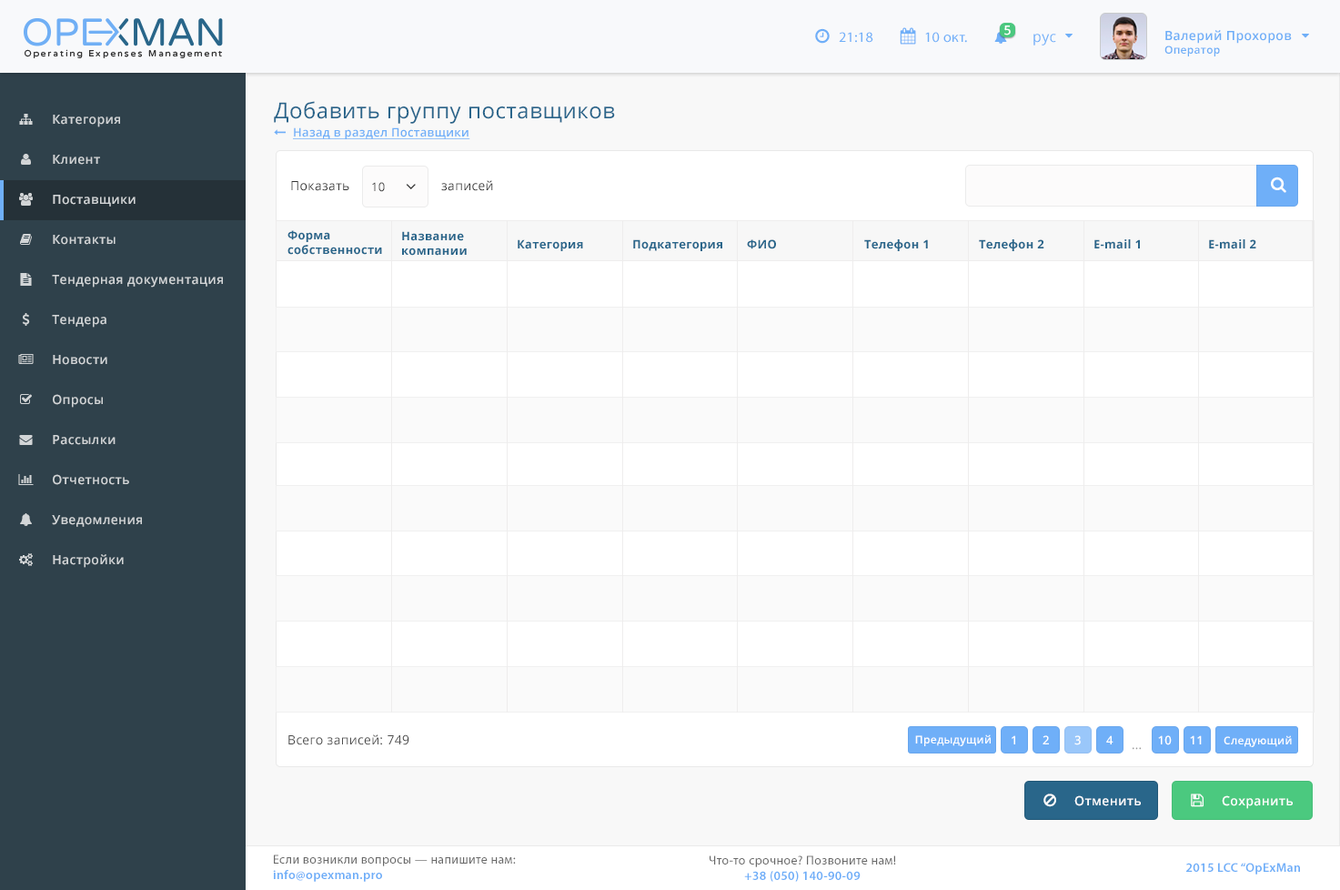
<style>
.page{position:relative;width:1340px;height:890px;background:#ffffff}
.page>*{position:absolute;margin:0}
.t1{font:12.7px "OpenSans-Semibold";letter-spacing:0.025em;color:#ffffff}
.t2{font:14.5px "MyriadPro-Regular";letter-spacing:0.025em;color:#6faff8}
.t3{font:14.5px "OpenSans";letter-spacing:0.025em;color:#6eaff8}
.t4{font:12.7px "OpenSans-Semibold";letter-spacing:0.025em;color:#6eaef7}
.t5{font:10.9px "OpenSans-Semibold";letter-spacing:0.025em;color:#6eaef7}
.t6{font:21.8px "OpenSans";letter-spacing:0.025em;color:#29658b}
.t7{font:12.7px "OpenSans-Semibold";letter-spacing:0.025em;color:#d2d5d7}
.t8{font:11.8px "OpenSans-Semibold";letter-spacing:0.025em;color:#6faff8;text-decoration:underline}
.t9{font:12.7px "OpenSans";letter-spacing:0.025em;color:#333333}
.t10{font:11.8px "OpenSans";letter-spacing:0.025em;color:#333333}
.t11{font:11.8px "OpenSans-Bold";letter-spacing:0.025em;color:#29668b}
.t12{font:12.7px "OpenSans";letter-spacing:0.025em;color:#4c4c4c}
.t13{font:10.9px "OpenSans-Semibold";letter-spacing:0.025em;color:#ffffff}
.t14{font:11.8px "OpenSans-Semibold";letter-spacing:0.025em;color:#ffffff}
.t15{font:11.8px "OpenSans";letter-spacing:0.025em;color:#999999}
.t16{font:12.7px "MyriadPro-Regular";letter-spacing:0.025em;color:#696969}
.t17{font:12.7px "MyriadPro-Semibold";letter-spacing:0.025em;color:#6eaef8}
</style>
<div class="page">
<p class="t1" style="left:1004px;top:25px;width:7px;height:10px">5</p>
<p class="t2" style="left:839px;top:32px;width:34px;height:11px">21:18</p>
<p class="t2" style="left:925px;top:32px;width:42px;height:11px">10 окт.</p>
<p class="t3" style="left:1034px;top:34px;width:22px;height:11px">рус</p>
<p class="t4" style="left:1165px;top:30px;width:127px;height:26px">Валерий Прохоров<br><span class="t5">Оператор</span></p>
<p class="t6" style="left:274px;top:101px;width:341px;height:23px">Добавить группу поставщиков</p>
<p class="t7" style="left:53px;top:115px;width:67px;height:12px">Категория</p>
<p class="t8" style="left:293px;top:127px;width:177px;height:12px">Назад в раздел Поставщики</p>
<p class="t7" style="left:53px;top:155px;width:47px;height:10px">Клиент</p>
<p class="t9" style="left:291px;top:181px;width:58px;height:10px">Показать</p>
<p class="t10" style="left:372px;top:182px;width:13px;height:10px">10</p>
<p class="t9" style="left:441px;top:180px;width:52px;height:11px">записей</p>
<p class="t7" style="left:53px;top:195px;width:83px;height:12px">Поставщики</p>
<p class="t11" style="left:287px;top:230px;width:95px;height:25px">Форма<br>собственности</p>
<p class="t11" style="left:402px;top:231px;width:65px;height:25px">Название<br>компании</p>
<p class="t7" style="left:53px;top:235px;width:63px;height:10px">Контакты</p>
<p class="t11" style="left:518px;top:239px;width:65px;height:12px">Категория</p>
<p class="t11" style="left:633px;top:239px;width:89px;height:12px">Подкатегория</p>
<p class="t11" style="left:747px;top:239px;width:29px;height:10px">ФИО</p>
<p class="t11" style="left:864px;top:239px;width:64px;height:12px">Телефон 1</p>
<p class="t11" style="left:979px;top:239px;width:65px;height:12px">Телефон 2</p>
<p class="t11" style="left:1094px;top:239px;width:46px;height:10px">E-mail 1</p>
<p class="t11" style="left:1209px;top:239px;width:47px;height:10px">E-mail 2</p>
<p class="t7" style="left:52px;top:275px;width:171px;height:12px">Тендерная документация</p>
<p class="t7" style="left:52px;top:315px;width:54px;height:13px">Тендера</p>
<p class="t7" style="left:53px;top:355px;width:54px;height:10px">Новости</p>
<p class="t7" style="left:53px;top:394px;width:50px;height:14px">Опросы</p>
<p class="t7" style="left:53px;top:435px;width:63px;height:10px">Рассылки</p>
<p class="t7" style="left:53px;top:474px;width:76px;height:11px">Отчетность</p>
<p class="t7" style="left:52px;top:515px;width:90px;height:12px">Уведомления</p>
<p class="t7" style="left:53px;top:554px;width:71px;height:14px">Настройки</p>
<p class="t12" style="left:288px;top:734px;width:121px;height:11px">Всего записей: 749</p>
<p class="t13" style="left:915px;top:734px;width:76px;height:12px">Предыдущий</p>
<p class="t14" style="left:1012px;top:735px;width:3px;height:9px">1</p>
<p class="t14" style="left:1043px;top:735px;width:6px;height:9px">2</p>
<p class="t14" style="left:1074px;top:735px;width:7px;height:10px">3</p>
<p class="t14" style="left:1106px;top:735px;width:8px;height:9px">4</p>
<p class="t14" style="left:1158px;top:735px;width:14px;height:10px">10</p>
<p class="t14" style="left:1190px;top:735px;width:12px;height:9px">11</p>
<p class="t13" style="left:1224px;top:735px;width:68px;height:12px">Следующий</p>
<p class="t15" style="left:1133px;top:747px;width:8px;height:3px">...</p>
<p class="t1" style="left:1074px;top:795px;width:67px;height:11px">Отменить</p>
<p class="t1" style="left:1222px;top:795px;width:71px;height:14px">Сохранить</p>
<p class="t16" style="left:273px;top:854px;width:243px;height:28px">Если возникли вопросы — напишите нам:<br><span class="t17">info@opexman.pro</span></p>
<p class="t16" style="left:710px;top:855px;width:186px;height:27px;text-align:center">Что-то срочное? Позвоните нам!<br><span class="t17">+38 (050) 140-90-09</span></p>
<p class="t17" style="left:1186px;top:862px;width:114px;height:12px">2015 LCC “OpExMan</p>
</div>
